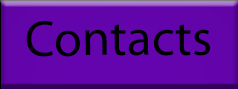
<style>
.page{position:relative;width:238px;height:89px}
.page>*{position:absolute;margin:0}
.t1{font:51px "MyriadPro-Regular";color:#000000}
</style>
<div class="page">
<p class="t1" style="left:26px;top:21px;width:184px;height:36px">Contacts</p>
</div>
